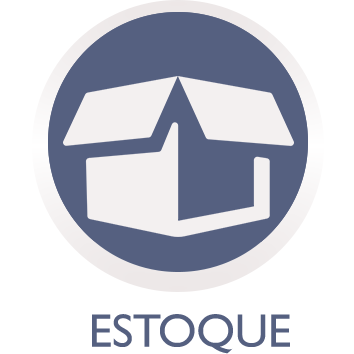
<style>
.page{position:relative;width:354px;height:354px;background:#ffffff}
.page>*{position:absolute;margin:0}
.t1{font:47.2px "GillSansMT";letter-spacing:-0.01em;color:#556080}
</style>
<div class="page">
<p class="t1" style="left:92px;top:314px;width:198px;height:40px">ESTOQUE</p>
</div>
